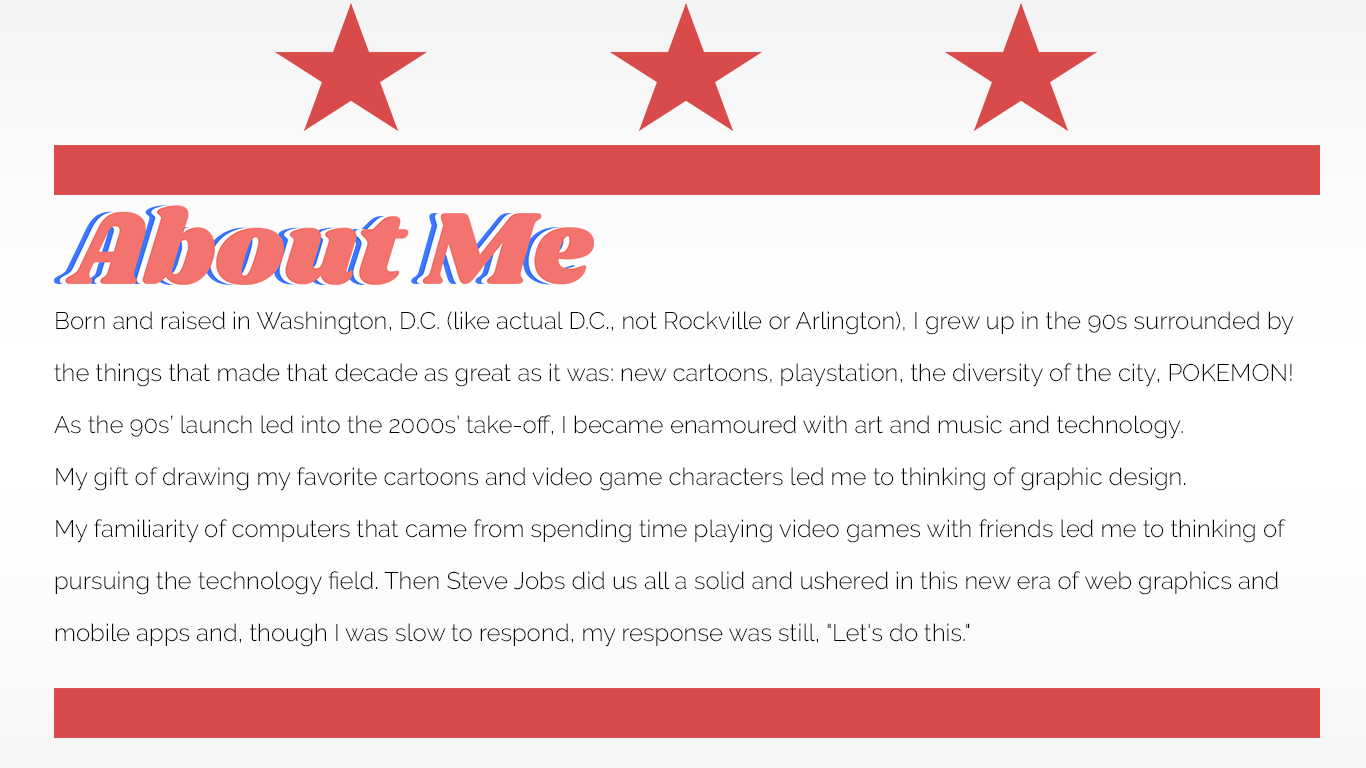
<style>
.page{position:relative;width:1366px;height:768px}
.page>*{position:absolute;margin:0}
.t1{font:24px/52px "Raleway-Light";color:#030303}
.t2{font:60px/52px "Shrikhand-Regular";color:#f3736e}
</style>
<div class="page">
<p class="t1" style="left:54px;top:311px;width:1240px;height:336px"><span class="t2"><br></span>Born and raised in Washington, D.C. (like actual D.C., not Rockville or Arlington), I grew up in the 90s surrounded by the things that made that decade as great as it was: new cartoons, playstation, the diversity of the city, POKEMON! As the 90s’ launch led into the 2000s’ take-off, I became enamoured with art and music and technology.<br>My gift of drawing my favorite cartoons and video game characters led me to thinking of graphic design.<br>My familiarity of computers that came from spending time playing video games with friends led me to thinking of pursuing the technology field. Then Steve Jobs did us all a solid and ushered in this new era of web graphics and mobile apps and, though I was slow to respond, my response was still, "Let's do this."</p>
</div>
